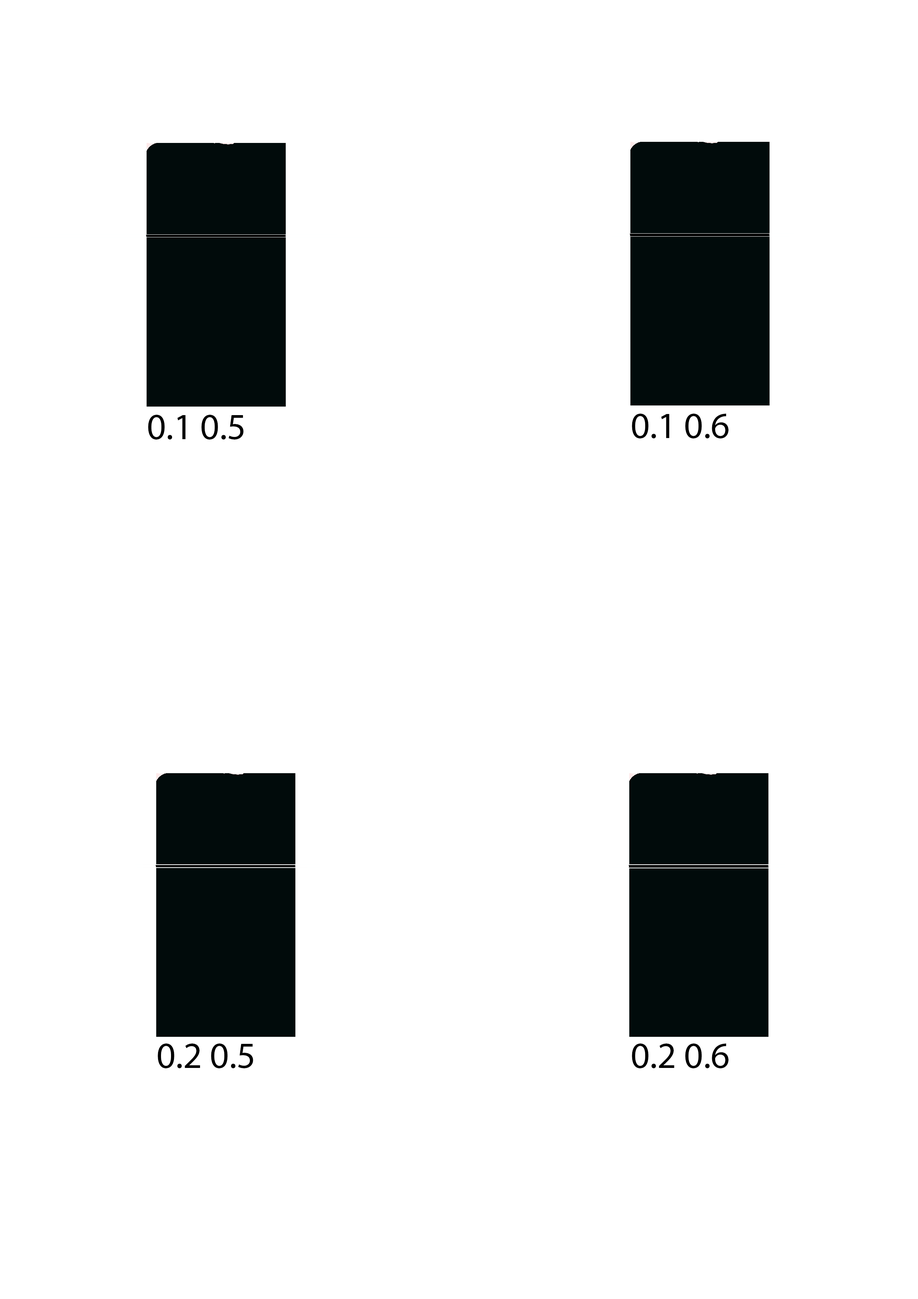
<style>
.page{position:relative;width:918px;height:1299px;background:#ffffff}
.page>*{position:absolute;margin:0}
.t1{font:37px "MyriadPro-Regular";color:#000000}
</style>
<div class="page">
<p class="t1" style="left:632px;top:414px;width:97px;height:24px">0.1 0.6</p>
<p class="t1" style="left:148px;top:415px;width:96px;height:24px">0.1 0.5</p>
<p class="t1" style="left:158px;top:1043px;width:95px;height:25px">0.2 0.5</p>
<p class="t1" style="left:632px;top:1043px;width:97px;height:25px">0.2 0.6</p>
</div>
